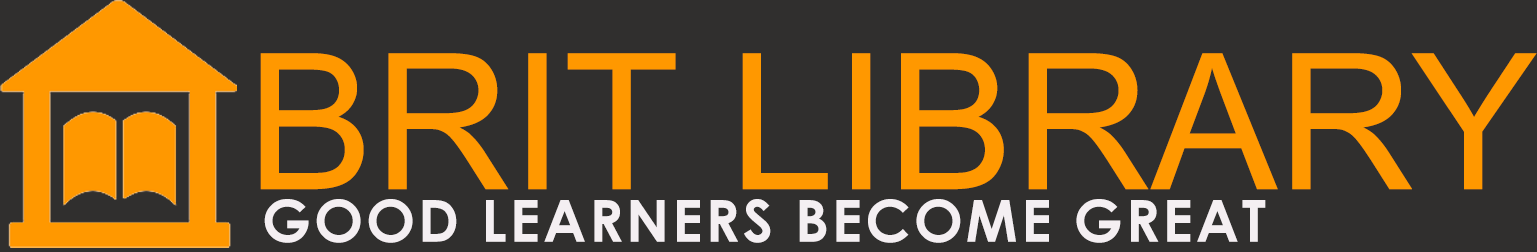
<style>
.page{position:relative;width:1537px;height:252px;background:#302f2e}
.page>*{position:absolute;margin:0}
.t1{font:189.5px "ARDS1";color:#ff9800;text-transform:uppercase}
.t2{font:58.3px "CenturyGothic-Bold";letter-spacing:0.05em;color:#f4eff2;text-transform:uppercase}
</style>
<div class="page">
<p class="t1" style="left:260px;top:53px;width:1277px;height:137px">Brit Library</p>
<p class="t2" style="left:264px;top:199px;width:1002px;height:44px">Good learners become greaT</p>
</div>
